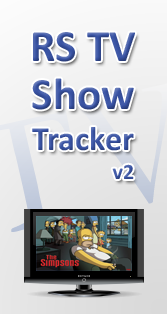
<style>
.page{position:relative;width:167px;height:314px}
.page>*{position:absolute;margin:0}
.t1{font:45px "Calibri-Bold";color:#3953a4}
.t2{font:34px "Calibri-Bold";color:#3953a4}
.t3{font:22px "Calibri-Bold";color:#3953a4}
</style>
<div class="page">
<p class="t1" style="left:32px;top:32px;width:103px;height:147px;text-align:center">RS TV<br>Show<br><span class="t2">Tracker<br> </span><span class="t3">     v2</span></p>
</div>
